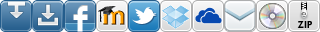
<style>
.page{position:relative;width:320px;height:32px}
.page>*{position:absolute;margin:0}
.t1{font:11px "TwCenMT-Bold";color:#000000}
</style>
<div class="page">
<p class="t1" style="left:297px;top:21px;width:15px;height:7px">ZIP</p>
</div>
